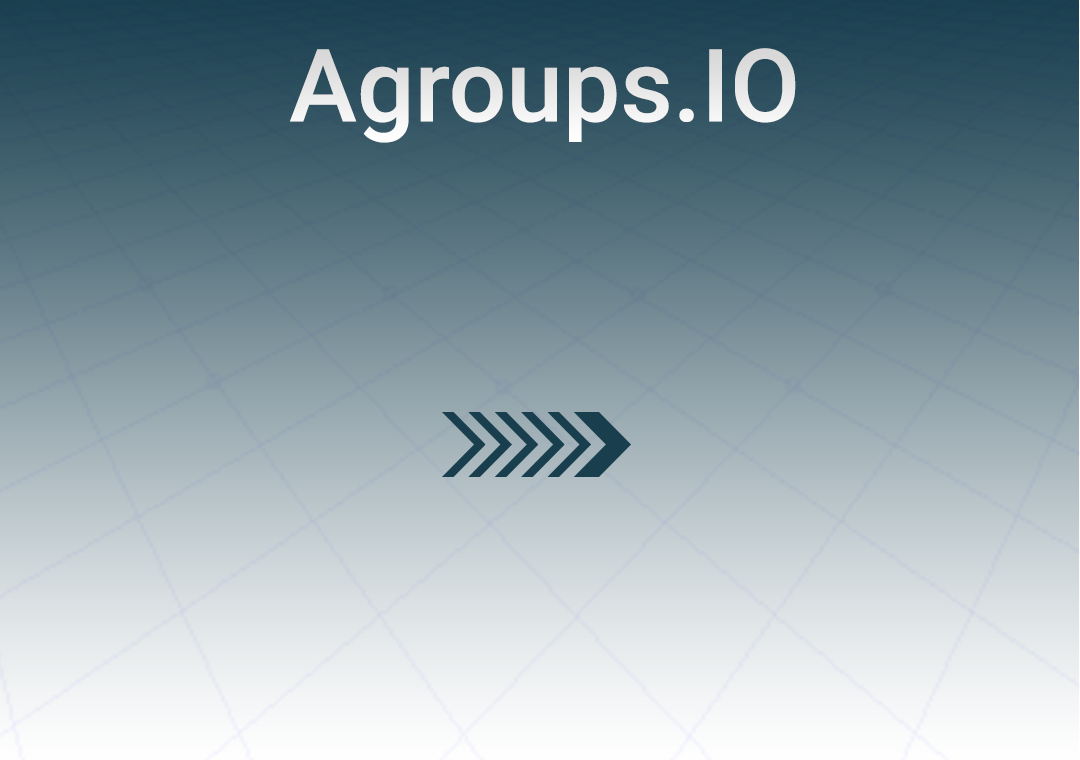
<style>
.page{position:relative;width:1080px;height:760px}
.page>*{position:absolute;margin:0}
.t1{font:101.3px "Roboto-Medium";color:#ffffff}
</style>
<div class="page">
<p class="t1" style="left:290px;top:48px;width:506px;height:95px">Agroups.IO</p>
</div>
